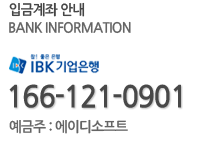
<style>
.page{position:relative;width:210px;height:143px;background:#ffffff}
.page>*{position:absolute;margin:0}
.t1{font:14px "NanumGothicBold";letter-spacing:-0.05em;color:#454545;scale:0.97 1}
.t2{font:14px "NanumGothicBold";letter-spacing:-0.05em;color:#656565;scale:0.97 1}
.t3{font:30px "NanumGothicBold";letter-spacing:-0.05em;color:#484848;scale:0.97 1}
</style>
<div class="page">
<p class="t1" style="left:9px;top:2px;width:76px;height:15px">입금계좌 안내</p>
<p class="t2" style="left:9px;top:21px;width:122px;height:13px">BANK INFORMATION</p>
<p class="t3" style="left:9px;top:84px;width:172px;height:24px">166-121-0901</p>
<p class="t2" style="left:9px;top:119px;width:119px;height:15px">예금주 : 에이디소프트</p>
</div>
